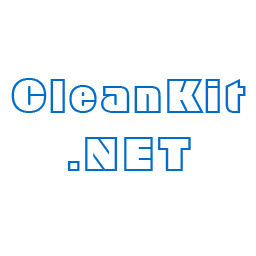
<style>
.page{position:relative;width:256px;height:256px;background:#ffffff}
.page>*{position:absolute;margin:0}
.t1{font:48px "G2Geometric885BT-RegularD";letter-spacing:0.01em;color:#006dca}
</style>
<div class="page">
<p class="t1" style="left:11px;top:78px;width:235px;height:93px;text-align:center">CleanKit<br>.NET</p>
</div>
